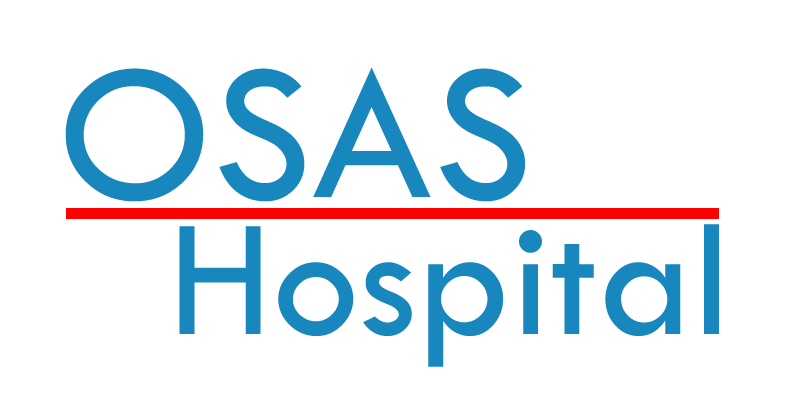
<style>
.page{position:relative;width:812px;height:403px;background:#ffffff}
.page>*{position:absolute;margin:0}
.t1{font:200px "TwCenMT-Regular";color:#1887be}
.t2{font:173px "TwCenMT-Regular";color:#1887be}
</style>
<div class="page">
<p class="t1" style="left:65px;top:67px;width:460px;height:135px">OSAS</p>
<p class="t2" style="left:179px;top:224px;width:540px;height:143px">Hospital</p>
</div>
